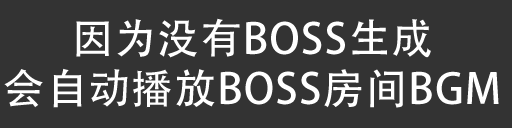
<style>
.page{position:relative;width:512px;height:128px;background:#333333}
.page>*{position:absolute;margin:0}
.t1{font:41.7px "AdobeHeitiStd-Regular";letter-spacing:0.03em;color:#ffffff}
</style>
<div class="page">
<p class="t1" style="left:4px;top:18px;width:495px;height:90px;text-align:center">因为没有BOSS生成<br>会自动播放BOSS房间BGM</p>
</div>
